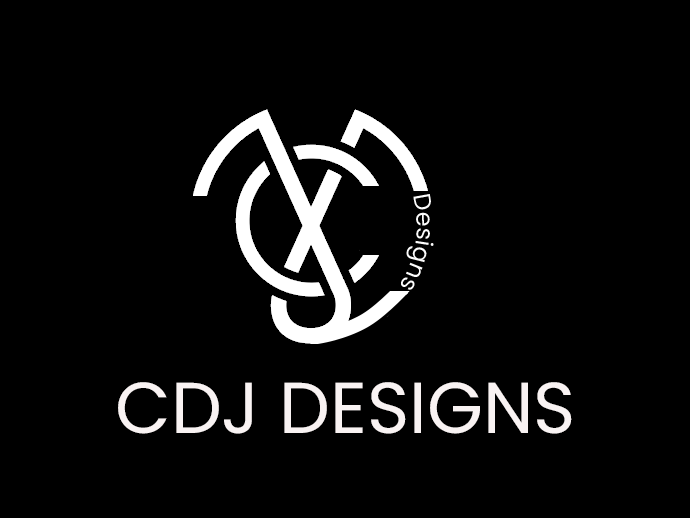
<style>
.page{position:relative;width:690px;height:518px;background:#000000}
.page>*{position:absolute;margin:0}
.t1{font:72px "Poppins-Regular";color:#f9f3f3}
</style>
<div class="page">
<p class="t1" style="left:118px;top:382px;width:454px;height:52px">CDJ DESIGNS</p>
</div>
